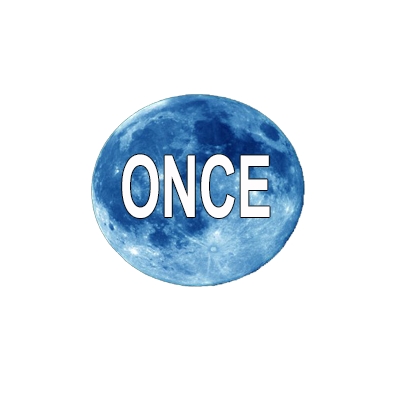
<style>
.page{position:relative;width:400px;height:400px;background:#ffffff}
.page>*{position:absolute;margin:0}
.t1{font:85.9px "Arial-BoldMT";color:#fefcfc;scale:0.61 1}
</style>
<div class="page">
<p class="t1" style="left:122px;top:154px;width:148px;height:64px">ONCE</p>
</div>
